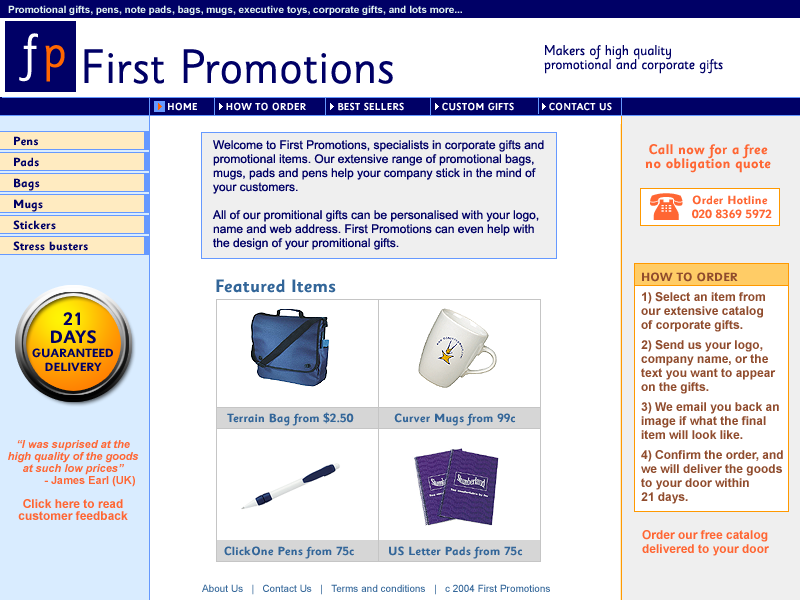
<style>
.page{position:relative;width:800px;height:600px;background:#ffffff}
.page>*{position:absolute;margin:0}
.t1{font:10px "Arial-BoldMT";color:#e0f3ef}
.t2{font:48px "SassoonSans";color:#ffffff}
.t3{font:48px "SassoonSans";color:#ff6600}
.t4{font:48px "SassoonSans";color:#000066}
.t5{font:14px/14px "SassoonSans";color:#000066}
.t6{font:10px "SassoonSans-Bold";color:#ffffff}
.t7{font:12px/10.5px "SassoonSans-Bold";color:#000066}
.t8{font:12px/14px "ArialMT";color:#000066}
.t9{font:14px/14px "SassoonSans-Bold";color:#ff6633}
.t10{font:12px/14px "SassoonSans-Bold";color:#ff6633}
.t11{font:18px "SassoonSans-Bold";color:#336699}
.t12{font:12px/14px "Arial-BoldMT";color:#904c2d}
.t13{font:12px/14px "SassoonSans-Bold";color:#904c2d}
.t14{font:12px/14px "SassoonSans-Bold";color:#000066}
.t15{font:18px/18px "SassoonSans-Bold";color:#000066}
.t16{font:12px/20px "SassoonSans-Bold";color:#336699}
.t17{font:12px/20px "Arial-BoldMT";color:#336699}
.t18{font:11px/12px "Arial-BoldItalicMT";color:#ff6633}
.t19{font:11px/12px "Arial-BoldMT";color:#ff6633}
.t20{font:12px/12px "Arial-BoldMT";color:#ff6633}
.t21{font:12px/14px "Arial-BoldMT";color:#ff6633}
.t22{font:10px "ArialMT";color:#336699}
</style>
<div class="page">
<p class="t1" style="left:8px;top:5px;width:454px;height:10px">Promotional gifts, pens, note pads, bags, mugs, executive toys, corporate gifts, and lots more...</p>
<p class="t2" style="left:19px;top:33px;width:19px;height:49px">f</p>
<p class="t3" style="left:45px;top:45px;width:20px;height:37px">p</p>
<p class="t4" style="left:84px;top:49px;width:309px;height:35px">First Promotions</p>
<p class="t5" style="left:544px;top:45px;width:179px;height:29px">Makers of high quality<br>promotional and corporate gifts</p>
<p class="t6" style="left:168px;top:102px;width:444px;height:9px">HOME         HOW TO ORDER          BEST SELLERS            CUSTOM GIFTS           CONTACT US</p>
<p class="t7" style="left:13px;top:136px;width:75px;height:115px">Pens<br><br>Pads<br><br>Bags<br><br>Mugs<br><br>Stickers<br><br>Stress busters</p>
<p class="t8" style="left:212px;top:140px;width:332px;height:110px">Welcome to First Promotions, specialists in corporate gifts and <br>promotional items. Our extensive range of promotional bags, <br>mugs, pads and pens help your company stick in the mind of <br>your customers.<br><br>All of our promitional gifts can be personalised with your logo, <br>name and web address. First Promotions can even help with <br>the design of your promitional gifts.</p>
<p class="t9" style="left:645px;top:144px;width:126px;height:29px;text-align:center">Call now for a free <br>no obligation quote</p>
<p class="t10" style="left:692px;top:195px;width:80px;height:24px">Order Hotline<br>020 8369 5972</p>
<p class="t11" style="left:216px;top:279px;width:120px;height:14px">Featured Items</p>
<p class="t12" style="left:641px;top:272px;width:142px;height:232px"><span class="t13">HOW TO ORDER<br><br></span>1) Select an item from <br>our extensive catalog<br>of corporate gifts.<br><br>2) Send us your logo,<br>company name, or the<br>text you want to appear<br>on the gifts.<br><br>3) We email you back an <br>image if what the final<br>item will look like.<br><br>4) Confirm the order, and<br>we will deliver the goods<br>to your door within <br>21 days.</p>
<p class="t14" style="left:32px;top:312px;width:81px;height:59px;text-align:center"><span class="t15">21<br>DAYS<br></span>GUARANTEED<br>DELIVERY</p>
<p class="t16" style="left:224px;top:412px;width:299px;height:147px"><span class="t17"> </span>Terrain Bag from $2.50           Curver Mugs from 99c<br><br><br><br><br><br><br>ClickOne Pens from 75c         US Letter Pads from 75c</p>
<p class="t18" style="left:8px;top:440px;width:131px;height:80px;text-align:center">“I was suprised at the <br>high quality of the goods<br>at such low prices”<br>         <span class="t19">  - James Earl (UK)<br><br></span><span class="t20">Click here to read<br>customer feedback</span></p>
<p class="t21" style="left:642px;top:530px;width:127px;height:26px">Order our free catalog<br>delivered to your door</p>
<p class="t22" style="left:202px;top:584px;width:348px;height:11px">About Us   |   Contact Us   |   Terms and conditions   |   c 2004 First Promotions</p>
</div>
